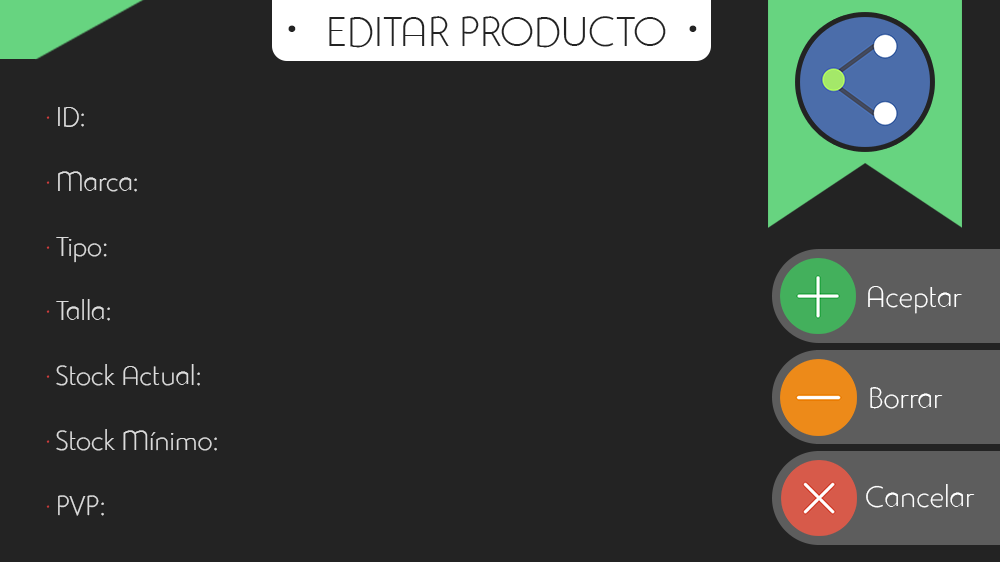
<style>
.page{position:relative;width:1000px;height:562px;background:#232323}
.page>*{position:absolute;margin:0}
.t1{font:41px "StudioGothicAlternateTrial-Extr";color:#232323}
.t2{font:97px "StudioGothicAlternateTrial-Extr";color:#232323}
.t3{font:27px "StudioGothicAlternateTrial-Extr";color:#dbdbdb}
.t4{font:27px "StudioGothicAlternateTrial-Extr";color:#d63f3f}
.t5{font:27px "StudioGothicAlternateTrial-Extr";color:#ca3b3b}
.t6{font:29px "StudioGothicAlternateTrial-Extr";color:#ffffff}
</style>
<div class="page">
<p class="t1" style="left:329px;top:16px;width:337px;height:32px">EDITAR PRODUCTO</p>
<p class="t2" style="left:288px;top:25px;width:409px;height:7px">·                 ·</p>
<p class="t3" style="left:46px;top:107px;width:171px;height:409px"><span class="t4">· </span>ID:<br><span class="t4"><br>· </span>Marca:<br><br><span class="t4">· </span>Tipo:<br><br><span class="t4">· </span>Talla:<br><span class="t4"><br>· </span>Stock Actual:<br><br><span class="t4">· </span>Stock Mínimo:<br><br><span class="t5">· </span>PVP:</p>
<p class="t6" style="left:868px;top:286px;width:94px;height:28px">Aceptar</p>
<p class="t6" style="left:870px;top:387px;width:73px;height:22px">Borrar</p>
<p class="t6" style="left:866px;top:484px;width:109px;height:24px">Cancelar</p>
</div>
